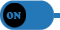
<style>
.page{position:relative;width:60px;height:30px;background:#2478b8}
.page>*{position:absolute;margin:0}
.t1{font:9.9px "CooperBlack";color:#2478b8;scale:0.91 1}
</style>
<div class="page">
<p class="t1" style="left:6px;top:12px;width:15px;height:7px">ON</p>
</div>
